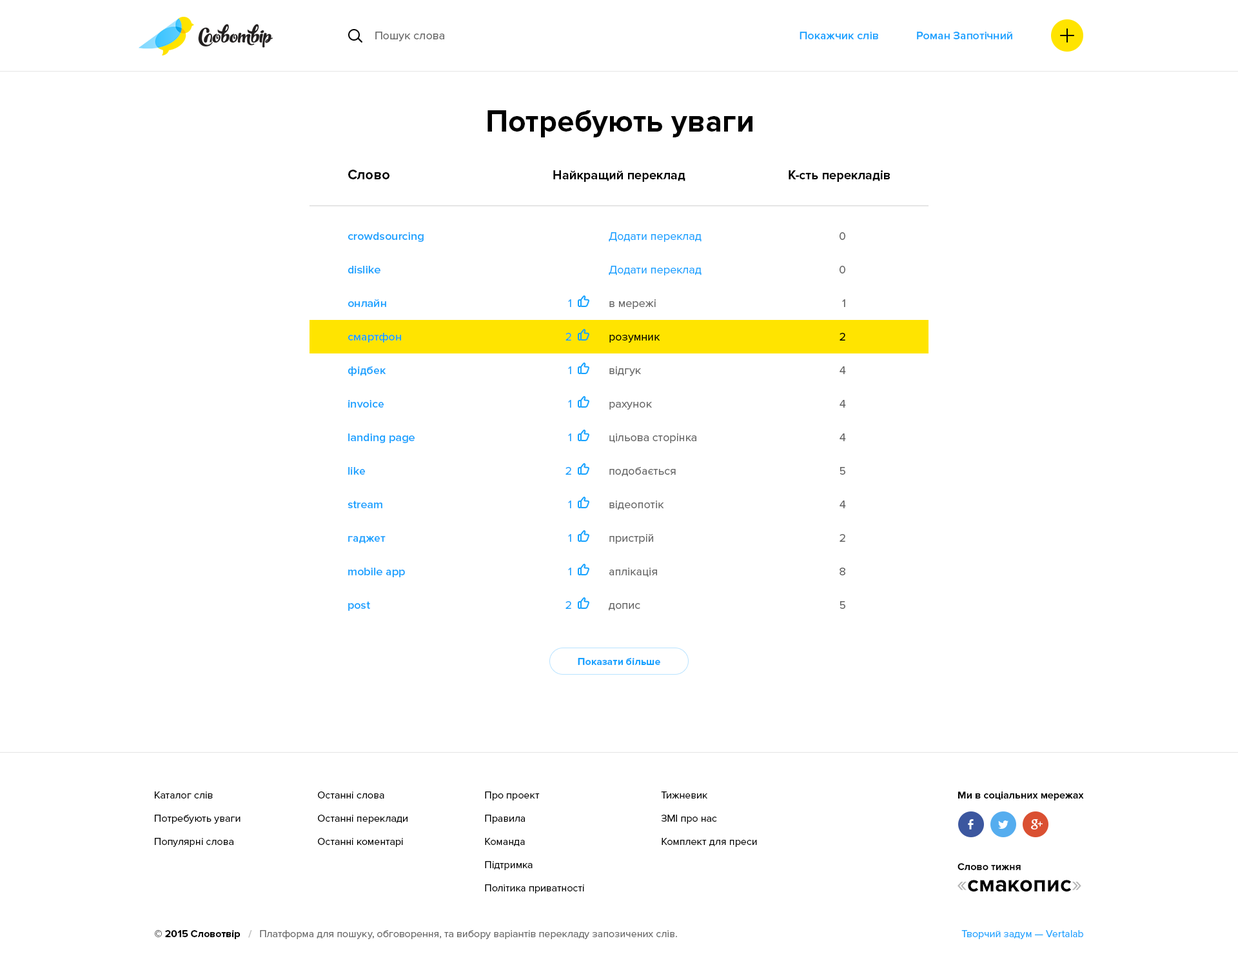
<style>
.page{position:relative;width:1238px;height:963px;background:#ffffff}
.page>*{position:absolute;margin:0}
.t1{font:11.6px "ProximaNova-Regular";color:#666666}
.t2{font:11.6px "ProximaNova-Semibold";color:#17a2ff}
.t3{font:31px "ProximaNova-Bold";color:#000000}
.t4{font:14.2px "ProximaNova-Bold";color:#000000}
.t5{font:12.9px "ProximaNova-Bold";color:#000000}
.t6{font:11.6px/33.5px "ProximaNova-Semibold";color:#17a2ff}
.t7{font:11.6px/33.5px "ProximaNova-Regular";color:#666666}
.t8{font:11.6px/33.5px "ProximaNova-Regular";color:#17a2ff}
.t9{font:11.6px/33.5px "ProximaNova-Regular";color:#000000}
.t10{font:10.3px "ProximaNova-Bold";color:#17a2ff}
.t11{font:10.3px/23.2px "ProximaNova-Regular";color:#000000}
.t12{font:10.3px/23.2px "ProximaNova-Regular";color:#010101}
.t13{font:10.3px "ProximaNova-Bold";color:#010101}
.t14{font:23.2px "ProximaNova-Bold";color:#000000}
.t15{font:23.2px "ProximaNova-Regular";color:#b3b3b3}
.t16{font:10.3px "ProximaNova-Regular";color:#666666}
.t17{font:10.3px "ProximaNova-Bold";color:#000000}
.t18{font:10.3px "ProximaNova-Bold";color:#bfbfbf}
.t19{font:10.3px "ProximaNova-Regular";color:#17a2ff}
</style>
<div class="page">
<p class="t1" style="left:375px;top:32px;width:69px;height:9px">Пошук слова</p>
<p class="t2" style="left:800px;top:32px;width:78px;height:7px">Покажчик слів</p>
<p class="t2" style="left:917px;top:32px;width:96px;height:7px">Роман Запотічний</p>
<p class="t3" style="left:488px;top:110px;width:265px;height:27px">Потребують уваги</p>
<p class="t4" style="left:348px;top:170px;width:42px;height:9px">Слово</p>
<p class="t5" style="left:553px;top:170px;width:133px;height:12px">Найкращий переклад</p>
<p class="t5" style="left:789px;top:170px;width:101px;height:12px">К-сть перекладів</p>
<p class="t6" style="left:348px;top:232px;width:76px;height:379px">crowdsourcing<br>dislike<br>онлайн<br>смартфон<br>фідбек<br>invoice<br>landing page<br>like<br>stream<br>гаджет<br>mobile app<br>post</p>
<p class="t7" style="left:609px;top:232px;width:93px;height:379px"><span class="t8">Додати переклад<br>Додати переклад<br></span>в мережі<br><span class="t9">розумник<br></span>відгук<br>рахунок<br>цільова сторінка<br>подобається<br>відеопотік<br>пристрій<br>аплікація<br>допис</p>
<p class="t7" style="left:840px;top:232px;width:6px;height:377px;text-align:right">0<br>0<br>1<br><span class="t9">2<br></span>4<br>4<br>4<br>5<br>4<br>2<br>8<br>5</p>
<p class="t8" style="left:566px;top:299px;width:5px;height:310px;text-align:right">1<br>2<br>1<br>1<br>1<br>2<br>1<br>1<br>1<br>2</p>
<p class="t10" style="left:578px;top:658px;width:82px;height:7px">Показати більше</p>
<p class="t11" style="left:155px;top:791px;width:86px;height:56px">Каталог слів<br>Потребують уваги<br>Популярні слова</p>
<p class="t11" style="left:318px;top:791px;width:90px;height:56px">Останні слова<br>Останні переклади<br>Останні коментарі</p>
<p class="t11" style="left:485px;top:791px;width:99px;height:102px">Про проект<br>Правила<br>Команда<br>Підтримка<br>Політика приватності</p>
<p class="t12" style="left:661px;top:791px;width:96px;height:56px">Тижневик<br>ЗМІ про нас<br>Комплект для преси</p>
<p class="t13" style="left:958px;top:791px;width:126px;height:9px">Ми в соціальних мережах</p>
<p class="t13" style="left:958px;top:863px;width:63px;height:7px">Слово тижня</p>
<p class="t14" style="left:958px;top:880px;width:124px;height:12px"><span class="t15">«</span>смакопис<span class="t15">»</span></p>
<p class="t16" style="left:155px;top:930px;width:522px;height:9px"><span class="t17">© 2015 Словотвір   </span><span class="t18">/   </span>Платформа для пошуку, обговорення, та вибору варіантів перекладу запозичених слів.</p>
<p class="t19" style="left:962px;top:930px;width:122px;height:9px">Творчий задум — Vertalab</p>
</div>
